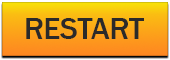
<style>
.page{position:relative;width:170px;height:60px}
.page>*{position:absolute;margin:0}
.t1{font:30.7px "FranklinGothic-Medium";color:#2b2a2a}
</style>
<div class="page">
<p class="t1" style="left:26px;top:18px;width:118px;height:21px">RESTART</p>
</div>
